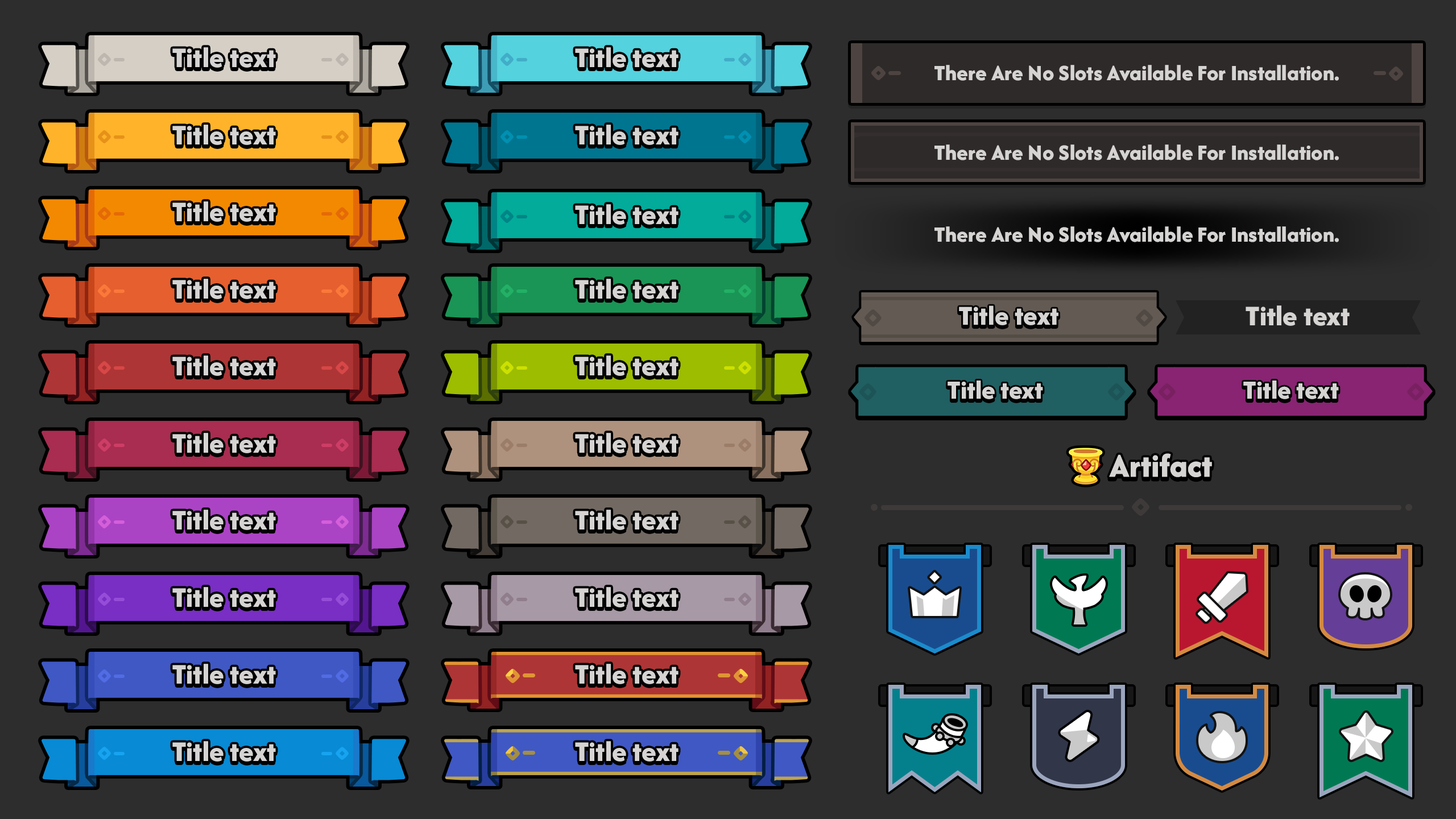
<style>
.page{position:relative;width:1456px;height:819px;background:#2d2d2d}
.page>*{position:absolute;margin:0}
.t1{font:29.6px "AfacadFlux-ExtraBold";color:#d6d4d3}
.t2{font:22.7px "AfacadFlux-ExtraBold";color:#d6d4d3}
.t3{font:28.4px "AfacadFlux-ExtraBold";color:#d6d4d3}
.t4{font:27.3px "AfacadFlux-ExtraBold";color:#d6d4d3}
.t5{font:34.1px "AfacadFlux-ExtraBold";color:#d6d4d3}
</style>
<div class="page">
<p class="t1" style="left:172px;top:47px;width:104px;height:21px">Title text</p>
<p class="t1" style="left:575px;top:47px;width:104px;height:21px">Title text</p>
<p class="t2" style="left:934px;top:65px;width:405px;height:16px">There Are No Slots Available For Installation.</p>
<p class="t1" style="left:172px;top:125px;width:104px;height:20px">Title text</p>
<p class="t1" style="left:575px;top:125px;width:104px;height:20px">Title text</p>
<p class="t2" style="left:934px;top:144px;width:405px;height:16px">There Are No Slots Available For Installation.</p>
<p class="t1" style="left:172px;top:201px;width:104px;height:21px">Title text</p>
<p class="t1" style="left:575px;top:204px;width:104px;height:21px">Title text</p>
<p class="t2" style="left:934px;top:226px;width:405px;height:16px">There Are No Slots Available For Installation.</p>
<p class="t1" style="left:172px;top:279px;width:104px;height:20px">Title text</p>
<p class="t1" style="left:575px;top:279px;width:104px;height:20px">Title text</p>
<p class="t3" style="left:959px;top:305px;width:99px;height:20px">Title text</p>
<p class="t1" style="left:1246px;top:305px;width:104px;height:21px">Title text</p>
<p class="t1" style="left:172px;top:355px;width:104px;height:21px">Title text</p>
<p class="t1" style="left:575px;top:355px;width:104px;height:21px">Title text</p>
<p class="t4" style="left:948px;top:380px;width:95px;height:19px">Title text</p>
<p class="t4" style="left:1243px;top:380px;width:96px;height:19px">Title text</p>
<p class="t1" style="left:172px;top:433px;width:104px;height:20px">Title text</p>
<p class="t1" style="left:575px;top:433px;width:104px;height:20px">Title text</p>
<p class="t5" style="left:1109px;top:453px;width:103px;height:24px">Artifact</p>
<p class="t1" style="left:172px;top:510px;width:104px;height:20px">Title text</p>
<p class="t1" style="left:575px;top:510px;width:104px;height:20px">Title text</p>
<p class="t1" style="left:172px;top:587px;width:104px;height:20px">Title text</p>
<p class="t1" style="left:575px;top:587px;width:104px;height:20px">Title text</p>
<p class="t1" style="left:172px;top:664px;width:104px;height:20px">Title text</p>
<p class="t1" style="left:575px;top:664px;width:104px;height:20px">Title text</p>
<p class="t1" style="left:172px;top:741px;width:104px;height:21px">Title text</p>
<p class="t1" style="left:575px;top:741px;width:104px;height:21px">Title text</p>
</div>
